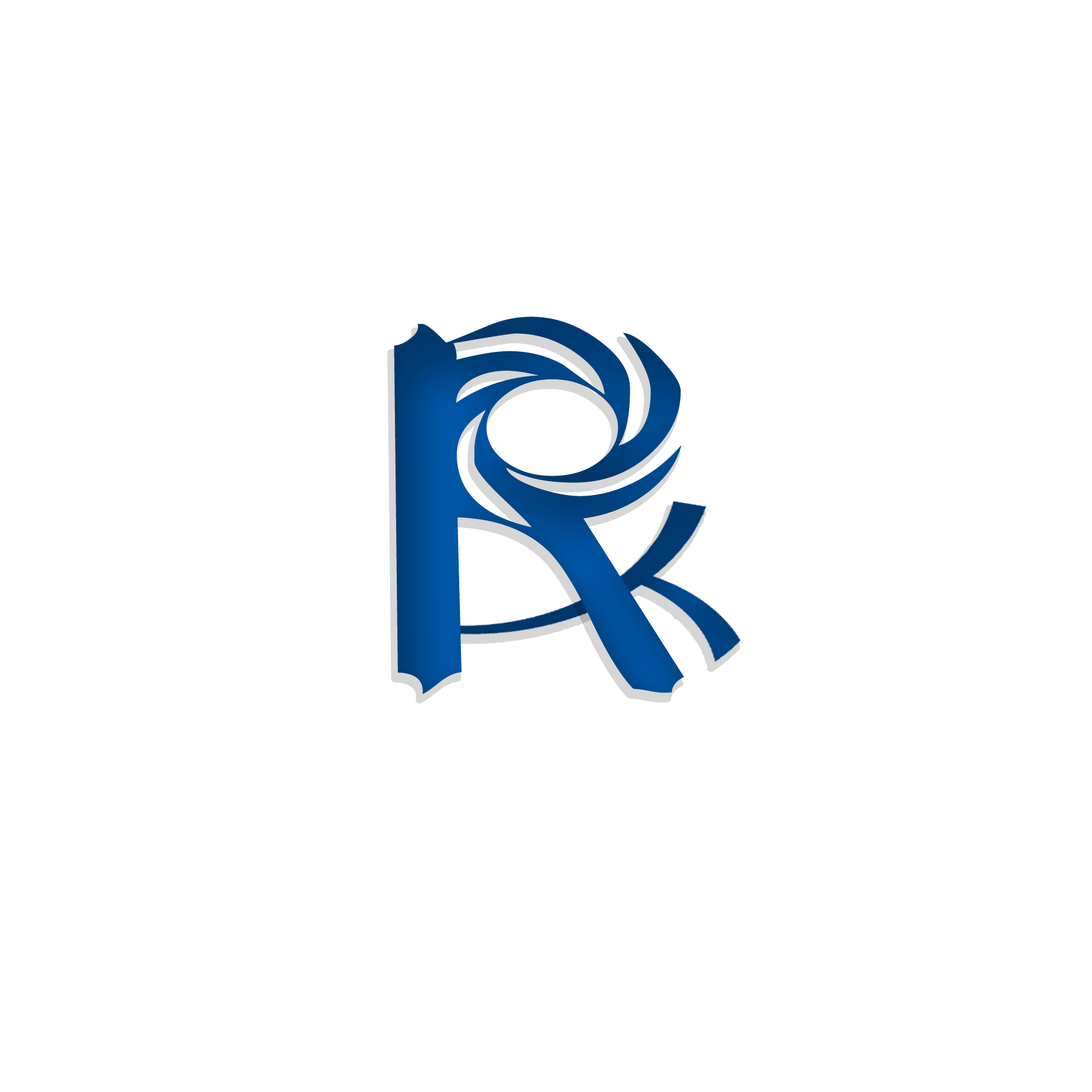
<style>
.page{position:relative;width:1092px;height:1092px;background:#ffffff}
.page>*{position:absolute;margin:0}
.t1{font:552.8px "Today";color:#00488b;scale:1.39 1}
</style>
<div class="page">
<p class="t1" style="left:394px;top:317px;width:290px;height:377px">R</p>
</div>
